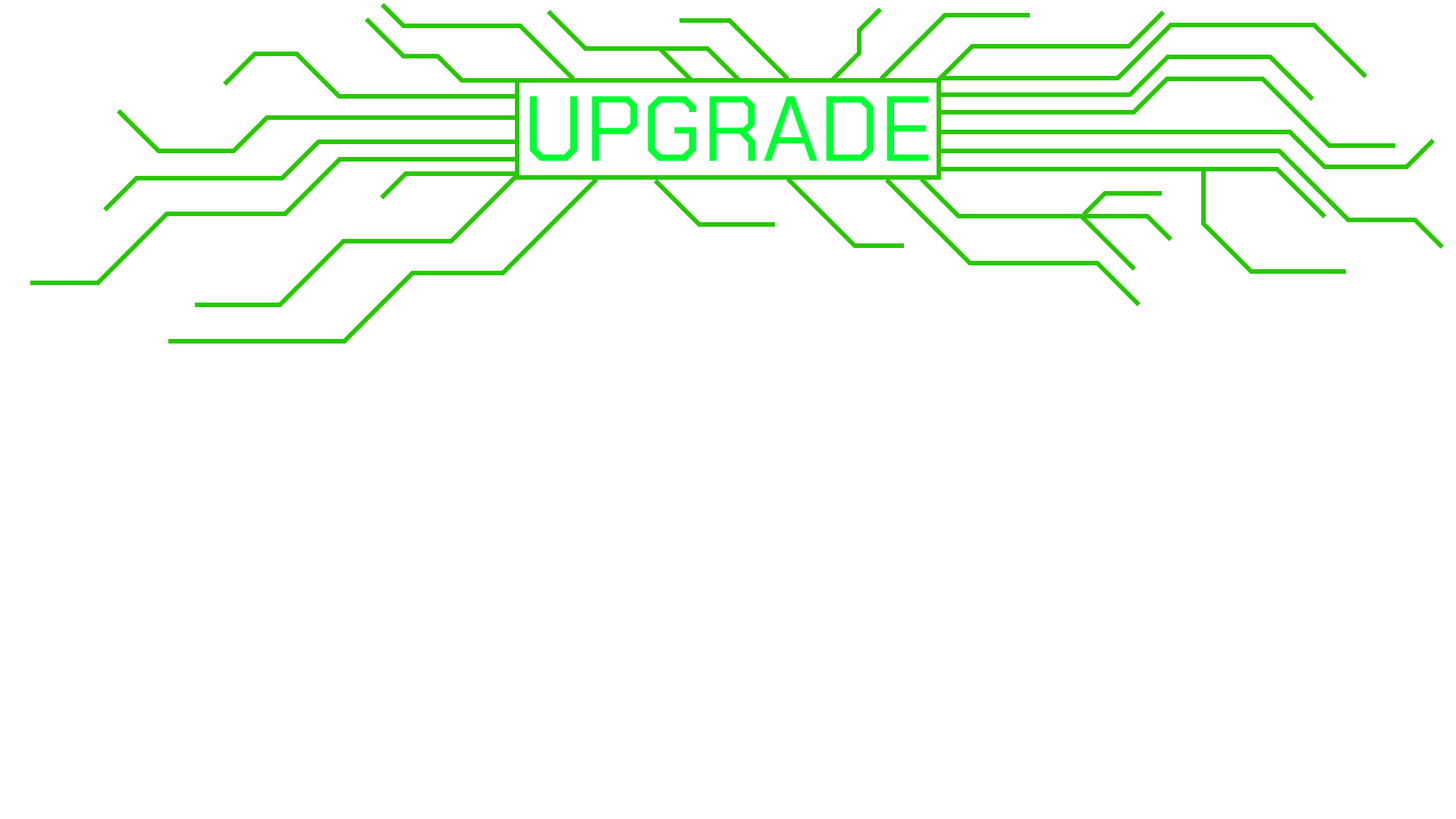
<style>
.page{position:relative;width:1456px;height:819px;background:#ffffff}
.page>*{position:absolute;margin:0}
.t1{font:92px "ChakraPetch-Regular";color:#00ff32}
</style>
<div class="page">
<p class="t1" style="left:529px;top:96px;width:400px;height:65px">UPGRADE</p>
</div>
